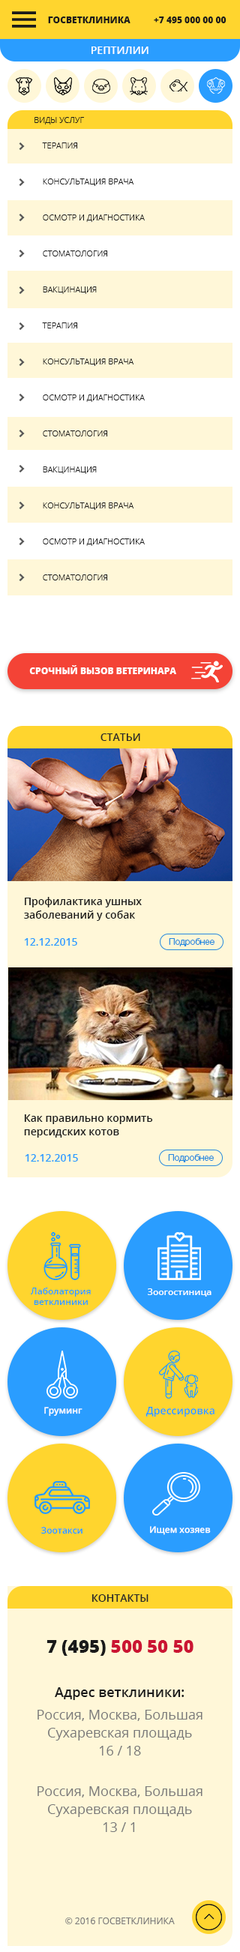
<style>
.page{position:relative;width:240px;height:1952px;background:#fff7d8}
.page>*{position:absolute;margin:0}
.t1{font:9px "OpenSans-Extrabold";color:#1b1b1b}
.t2{font:10.5px "OpenSans-Semibold";color:#ffffff}
.t3{font:8.2px "OpenSans-Light";color:#1a1a1a}
.t4{font:8.2px/36px "OpenSans-Light";color:#1a1a1a}
.t5{font:9px "OpenSans-Extrabold";color:#ffffff}
.t6{font:10.5px "OpenSans-Semibold";color:#292929}
.t7{font:10.5px/13.5px "OpenSans-Semibold";color:#1a1a1a}
.t8{font:10.5px "OpenSans-Semibold";color:#2a9dff}
.t9{font:9px "HelveticaNeueCyr-Light";color:#2589de}
.t10{font:9px/10.5px "OpenSans-Semibold";color:#2a9dff}
.t11{font:9px "OpenSans-Semibold";color:#ffffff}
.t12{font:9px "OpenSans-Semibold";color:#2a9dff}
.t13{font:18px "OpenSans-Extrabold";color:#cb1533}
.t14{font:18px "OpenSans-Extrabold";color:#1a1a1a}
.t15{font:13.5px/18px "OpenSans";color:#797979}
.t16{font:13.5px/16.5px "OpenSans-Semibold";color:#1a1a1a}
.t17{font:13.5px/22.5px "OpenSans";color:#797979}
.t18{font:9px "OpenSans";color:#797979}
</style>
<div class="page">
<p class="t1" style="left:48px;top:16px;width:178px;height:7px">ГОСВЕТКЛИНИКА          +7 495 000 00 00</p>
<p class="t2" style="left:91px;top:46px;width:57px;height:8px">РЕПТИЛИИ</p>
<p class="t3" style="left:34px;top:117px;width:50px;height:7px">ВИДЫ УСЛУГ</p>
<p class="t4" style="left:42px;top:142px;width:103px;height:438px">ТЕРАПИЯ<br>КОНСУЛЬТАЦИЯ ВРАЧА<br>ОСМОТР И ДИАГНОСТИКА<br>СТОМАТОЛОГИЯ<br>ВАКЦИНАЦИЯ<br>ТЕРАПИЯ<br>КОНСУЛЬТАЦИЯ ВРАЧА<br>ОСМОТР И ДИАГНОСТИКА<br>СТОМАТОЛОГИЯ<br>ВАКЦИНАЦИЯ<br>КОНСУЛЬТАЦИЯ ВРАЧА<br>ОСМОТР И ДИАГНОСТИКА<br>СТОМАТОЛОГИЯ</p>
<p class="t5" style="left:29px;top:665px;width:147px;height:9px">СРОЧНЫЙ ВЫЗОВ ВЕТЕРИНАРА</p>
<p class="t6" style="left:100px;top:733px;width:40px;height:8px">СТАТЬИ</p>
<p class="t7" style="left:24px;top:897px;width:118px;height:24px">Профилактика ушных <br>заболеваний у собак</p>
<p class="t8" style="left:24px;top:938px;width:53px;height:8px">12.12.2015</p>
<p class="t9" style="left:169px;top:938px;width:45px;height:8px">Подробнее</p>
<p class="t7" style="left:24px;top:1114px;width:129px;height:24px">Как правильно кормить <br>персидских котов</p>
<p class="t8" style="left:25px;top:1154px;width:53px;height:8px">12.12.2015</p>
<p class="t9" style="left:168px;top:1154px;width:46px;height:8px">Подробнее</p>
<p class="t10" style="left:30px;top:1288px;width:61px;height:17px;text-align:center">Лаболатория<br>ветклиники</p>
<p class="t11" style="left:148px;top:1288px;width:63px;height:9px">Зоогостиница</p>
<p class="t11" style="left:44px;top:1407px;width:38px;height:10px">Груминг</p>
<p class="t8" style="left:145px;top:1406px;width:69px;height:11px">Дрессировка</p>
<p class="t12" style="left:41px;top:1527px;width:41px;height:7px">Зоотакси</p>
<p class="t11" style="left:150px;top:1526px;width:61px;height:9px">Ищем хозяев</p>
<p class="t6" style="left:91px;top:1594px;width:57px;height:8px">КОНТАКТЫ</p>
<p class="t13" style="left:46px;top:1640px;width:147px;height:16px"><span class="t14">7 (495) </span>500 50 50</p>
<p class="t15" style="left:37px;top:1687px;width:165px;height:145px;text-align:center"><span class="t16">Адрес ветклиники:<br></span><span class="t17">Россия, Москва, Большая<br></span>Сухаревская площадь<br>16 / 18<br><br><span class="t17">Россия, Москва, Большая<br></span>Сухаревская площадь<br>13 / 1</p>
<p class="t18" style="left:65px;top:1918px;width:110px;height:6px">© 2016 ГОСВЕТКЛИНИКА</p>
</div>
